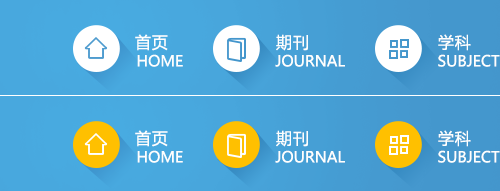
<style>
.page{position:relative;width:500px;height:191px}
.page>*{position:absolute;margin:0}
.t1{font:16px "MicrosoftYaHei";letter-spacing:0.05em;color:#fefffe;text-transform:uppercase}
.t2{font:15px "MicrosoftYaHei";color:#fefffe;text-transform:uppercase}
</style>
<div class="page">
<p class="t1" style="left:135px;top:34px;width:33px;height:17px">首页</p>
<p class="t1" style="left:276px;top:34px;width:32px;height:17px">期刊</p>
<p class="t1" style="left:438px;top:34px;width:33px;height:17px">学科</p>
<p class="t2" style="left:137px;top:54px;width:46px;height:13px">HOME</p>
<p class="t2" style="left:275px;top:54px;width:70px;height:13px">Journal</p>
<p class="t2" style="left:438px;top:54px;width:62px;height:13px">Subject</p>
<p class="t1" style="left:135px;top:130px;width:33px;height:17px">首页</p>
<p class="t1" style="left:276px;top:130px;width:32px;height:17px">期刊</p>
<p class="t1" style="left:438px;top:130px;width:33px;height:17px">学科</p>
<p class="t2" style="left:137px;top:150px;width:46px;height:13px">HOME</p>
<p class="t2" style="left:275px;top:150px;width:70px;height:13px">Journal</p>
<p class="t2" style="left:438px;top:150px;width:62px;height:13px">Subject</p>
</div>
